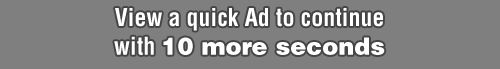
<style>
.page{position:relative;width:500px;height:69px;background:#7f7f7f}
.page>*{position:absolute;margin:0}
.t1{font:24px "Helvetica-Condensed-Bold";color:#ffffff}
.t2{font:24px "Helvetica-Black";color:#ffffff}
</style>
<div class="page">
<p class="t1" style="left:114px;top:8px;width:271px;height:47px;text-align:center">View a quick Ad to continue with <span class="t2">10 more seconds</span></p>
</div>
